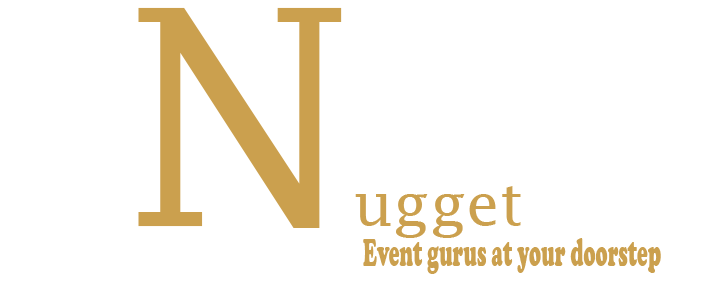
<style>
.page{position:relative;width:709px;height:283px;background:#ffffff}
.page>*{position:absolute;margin:0}
.t1{font:60px "LucidaFax";color:#cba04e}
.t2{font:301px "LucidaFax";color:#cba04e}
.t3{font:41.3px "CooperBlack";color:#cba04e;scale:0.49 1}
</style>
<div class="page">
<p class="t1" style="left:138px;top:7px;width:383px;height:231px"><span class="t2">N</span>ugget</p>
<p class="t3" style="left:363px;top:238px;width:298px;height:36px">Event gurus at your doorstep</p>
</div>
